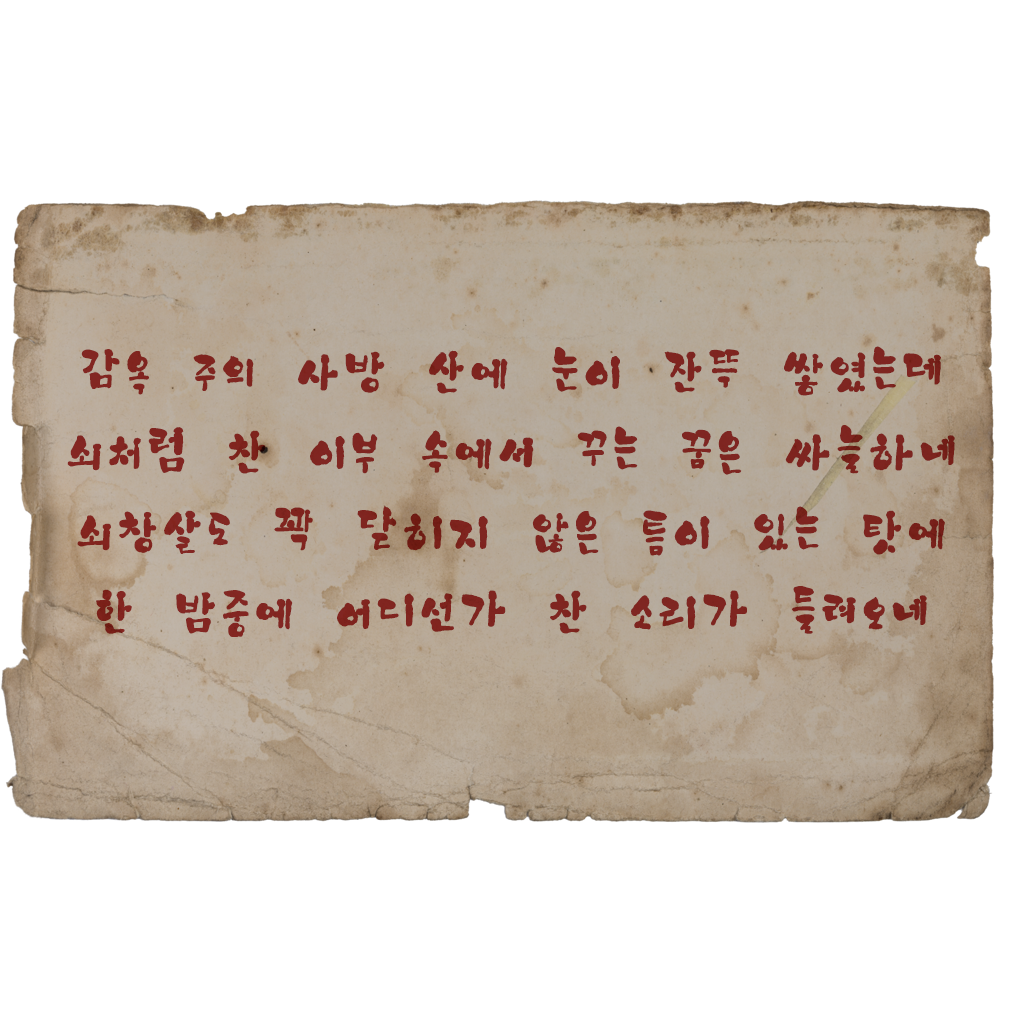
<style>
.page{position:relative;width:1024px;height:1024px;background:#ffffff}
.page>*{position:absolute;margin:0}
.t1{font:48px/16px "Yj-MAEHWA--SemiBold";color:#7f2520;font-weight:bold;scale:0.93 1}
</style>
<div class="page">
<p class="t1" style="left:67px;top:346px;width:888px;height:291px;text-align:center">감옥 주의 사방 산에 눈이 잔뜩 쌓였는데<br><br><br><br><br>쇠처럼 찬 이부 속에서 꾸는 꿈은 싸늘하네<br><br><br><br><br>쇠창살도 꽉 닫히지 않은 틈이 있는 탓에<br><br><br><br><br>한 밤중에 어디선가 찬 소리가 들려오네</p>
</div>
